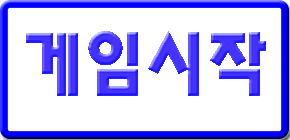
<style>
.page{position:relative;width:290px;height:140px;background:#ffffff}
.page>*{position:absolute;margin:0}
.t1{font:72px "HaanYHeadB";font-variant:small-caps}
</style>
<div class="page">
<p class="t1" style="left:26px;top:31px;width:240px;height:65px">게임시작</p>
</div>
